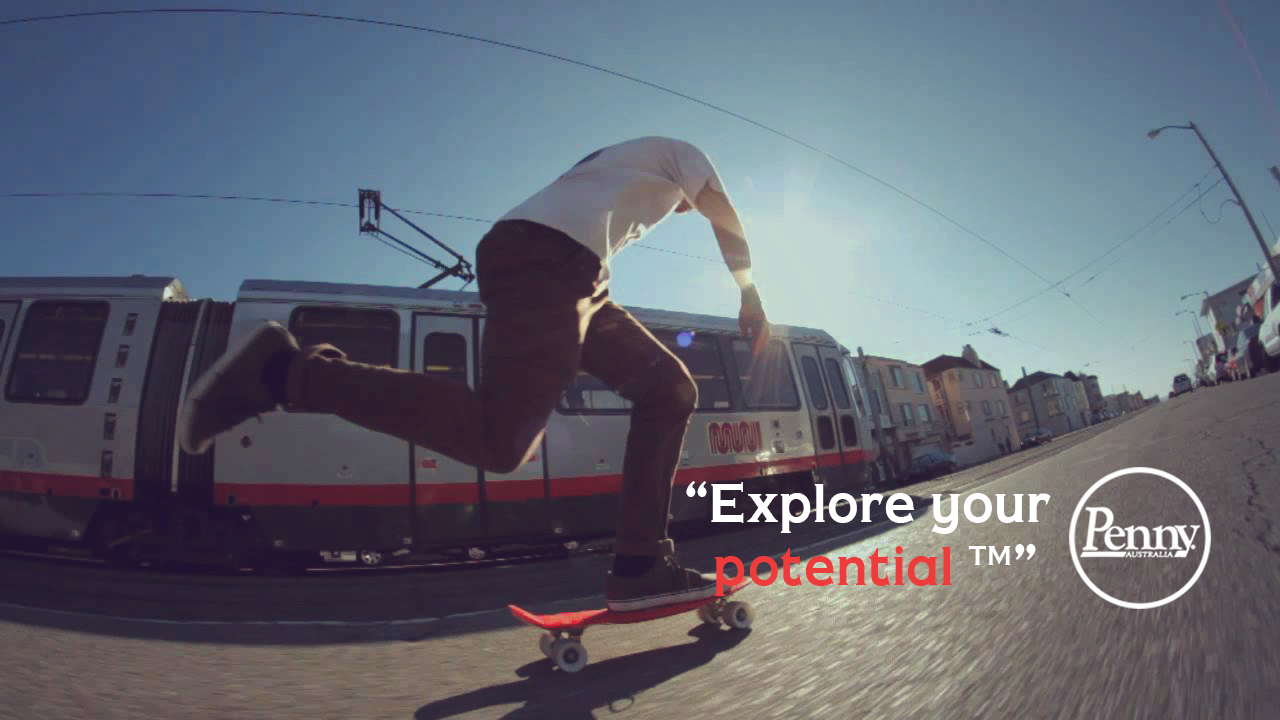
<style>
.page{position:relative;width:1280px;height:720px}
.page>*{position:absolute;margin:0}
.t1{font:52.5px "CopperPennyDTPNormal";color:#ffffff;scale:0.9 1}
.t2{font:52.5px "CopperPennyDTPNormal";color:#ee3b3b;scale:0.9 1}
</style>
<div class="page">
<p class="t1" style="left:686px;top:481px;width:365px;height:115px">“Explore your <br><span class="t2">  potential </span>™”</p>
</div>
